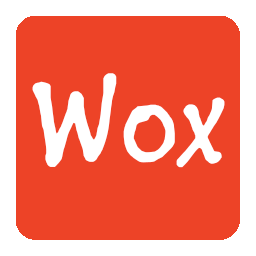
<style>
.page{position:relative;width:256px;height:256px;background:#ed4327}
.page>*{position:absolute;margin:0}
.t1{font:132px "BuxtonSketch";color:#ffffff}
</style>
<div class="page">
<p class="t1" style="left:32px;top:73px;width:193px;height:95px">Wox</p>
</div>
